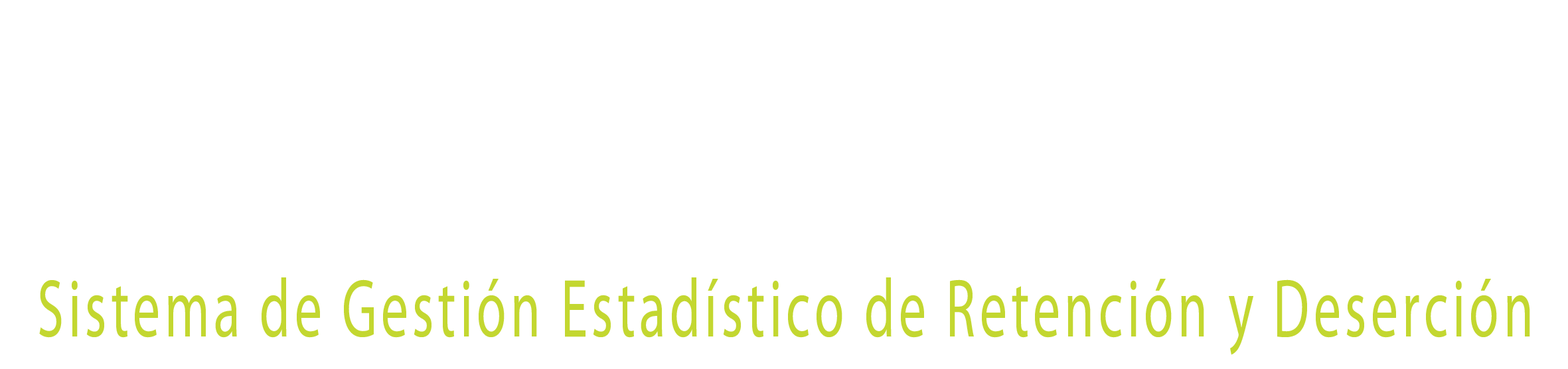
<style>
.page{position:relative;width:1568px;height:369px;background:#ffffff}
.page>*{position:absolute;margin:0}
.t1{font:83px "MyriadPro-Regular";letter-spacing:0.08em;color:#c3d730;scale:0.65 1}
</style>
<div class="page">
<p class="t1" style="left:39px;top:277px;width:1491px;height:78px">Sistema de Gestión Estadístico de Retención y Deserción</p>
</div>
